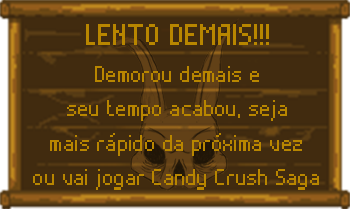
<style>
.page{position:relative;width:350px;height:209px;background:#412b0f}
.page>*{position:absolute;margin:0}
.t1{font:48.5px "Alterebro-Pixel-Font";color:#b88600}
.t2{font:36.4px "Alterebro-Pixel-Font";color:#b88600}
</style>
<div class="page">
<p class="t1" style="left:86px;top:24px;width:183px;height:21px">LENTO DEMAIS!!!</p>
<p class="t2" style="left:95px;top:66px;width:164px;height:16px">Demorou demais e</p>
<p class="t2" style="left:67px;top:100px;width:220px;height:21px">seu tempo acabou, seja</p>
<p class="t2" style="left:50px;top:133px;width:252px;height:23px">mais rápido da próxima vez</p>
<p class="t2" style="left:33px;top:169px;width:286px;height:21px">ou vai jogar Candy Crush Saga</p>
</div>
